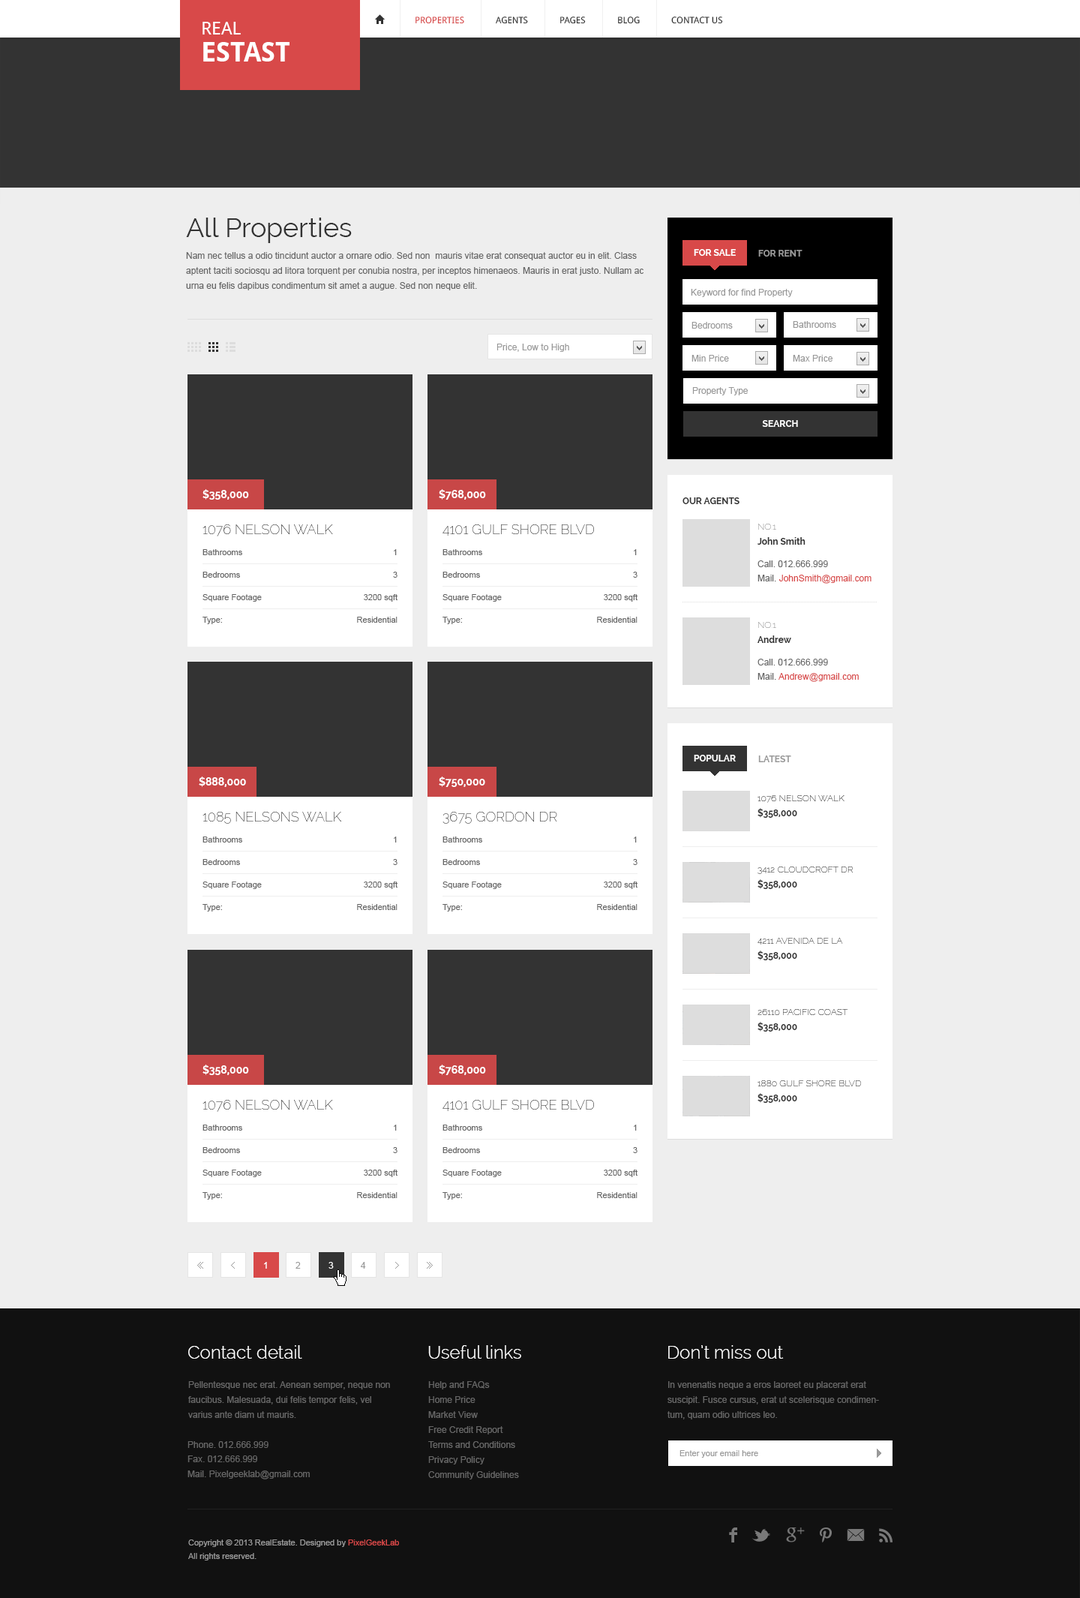
<style>
.page{position:relative;width:1080px;height:1598px;background:#eeeeee}
.page>*{position:absolute;margin:0}
.t1{font:9px "DroidSans";color:#d84949;text-transform:uppercase}
.t2{font:9px "DroidSans";color:#333333;text-transform:uppercase}
.t3{font:27px/27px "DroidSans-Bold";color:#ffffff;text-transform:uppercase}
.t4{font:18px/27px "DroidSans";color:#ffffff;text-transform:uppercase}
.t5{font:27px "Raleway";color:#333333}
.t6{font:9px/15px "ArialMT";color:#666666}
.t7{font:9px "Raleway-Bold";color:#ffffff;text-transform:uppercase}
.t8{font:9px "Raleway-Bold";color:#999999;text-transform:uppercase}
.t9{font:9px "ArialMT";color:#999999}
.t10{font:10.5px "Raleway-Bold";color:#ffffff;text-transform:uppercase}
.t11{font:9px "Raleway-Bold";color:#333333;text-transform:uppercase}
.t12{font:13.5px "Raleway-Thin";color:#333333;text-transform:uppercase}
.t13{font:9px "Raleway-Thin";text-transform:uppercase}
.t14{font:9px "Raleway-Bold";color:#333333}
.t15{font:8.2px "ArialMT";color:#666666}
.t16{font:9px "ArialMT";color:#666666}
.t17{font:9px "ArialMT";color:#d84949}
.t18{font:9px "Raleway-Thin";color:#333333;text-transform:uppercase}
.t19{font:9px "ArialMT";color:#ffffff}
</style>
<div class="page">
<p class="t1" style="left:416px;top:16px;width:48px;height:8px">Properties</p>
<p class="t2" style="left:496px;top:16px;width:32px;height:8px">agents</p>
<p class="t2" style="left:560px;top:16px;width:26px;height:8px">pages</p>
<p class="t2" style="left:618px;top:16px;width:22px;height:8px">blog</p>
<p class="t2" style="left:671px;top:16px;width:52px;height:8px">contact us</p>
<p class="t3" style="left:202px;top:22px;width:88px;height:40px"><span class="t4">Real <br></span>Estast</p>
<p class="t5" style="left:186px;top:218px;width:166px;height:25px">All Properties</p>
<p class="t6" style="left:186px;top:252px;width:458px;height:38px">Nam nec tellus a odio tincidunt auctor a ornare odio. Sed non  mauris vitae erat consequat auctor eu in elit. Class aptent taciti sociosqu ad litora torquent per conubia nostra, per inceptos himenaeos. Mauris in erat justo. Nullam ac urna eu felis dapibus condimentum sit amet a augue. Sed non neque elit.</p>
<p class="t7" style="left:694px;top:249px;width:42px;height:7px">for sale</p>
<p class="t8" style="left:758px;top:250px;width:44px;height:6px">for rent</p>
<p class="t9" style="left:691px;top:289px;width:102px;height:8px">Keyword for find Property</p>
<p class="t9" style="left:692px;top:322px;width:41px;height:6px">Bedrooms</p>
<p class="t9" style="left:793px;top:321px;width:43px;height:7px">Bathrooms</p>
<p class="t9" style="left:496px;top:344px;width:73px;height:8px">Price, Low to High</p>
<p class="t9" style="left:692px;top:355px;width:37px;height:7px">Min Price</p>
<p class="t9" style="left:793px;top:355px;width:39px;height:7px">Max Price</p>
<p class="t9" style="left:692px;top:387px;width:56px;height:8px">Property Type</p>
<p class="t7" style="left:762px;top:420px;width:36px;height:7px">search</p>
<p class="t10" style="left:202px;top:489px;width:47px;height:11px">$358,000</p>
<p class="t10" style="left:439px;top:489px;width:47px;height:11px">$768,000</p>
<p class="t11" style="left:682px;top:497px;width:58px;height:7px">our agents</p>
<p class="t12" style="left:202px;top:524px;width:131px;height:12px">1076 Nelson Walk</p>
<p class="t12" style="left:442px;top:524px;width:152px;height:12px">4101 Gulf Shore Blvd</p>
<p class="t13" style="left:758px;top:524px;width:18px;height:6px">No.1</p>
<p class="t14" style="left:758px;top:537px;width:48px;height:7px">John Smith</p>
<p class="t15" style="left:202px;top:549px;width:40px;height:6px">Bathrooms</p>
<p class="t15" style="left:394px;top:549px;width:3px;height:6px">1</p>
<p class="t15" style="left:442px;top:549px;width:40px;height:6px">Bathrooms</p>
<p class="t15" style="left:634px;top:549px;width:3px;height:6px">1</p>
<p class="t16" style="left:758px;top:560px;width:70px;height:7px">Call. 012.666.999</p>
<p class="t15" style="left:202px;top:572px;width:38px;height:6px">Bedrooms</p>
<p class="t15" style="left:393px;top:572px;width:5px;height:6px">3</p>
<p class="t15" style="left:442px;top:572px;width:38px;height:6px">Bedrooms</p>
<p class="t15" style="left:633px;top:572px;width:5px;height:6px">3</p>
<p class="t17" style="left:758px;top:574px;width:114px;height:10px"><span class="t16">Mail. </span>JohnSmith@gmail.com</p>
<p class="t15" style="left:202px;top:594px;width:60px;height:8px">Square Footage</p>
<p class="t15" style="left:364px;top:594px;width:34px;height:8px">3200 sqft</p>
<p class="t15" style="left:442px;top:594px;width:60px;height:8px">Square Footage</p>
<p class="t15" style="left:604px;top:594px;width:34px;height:8px">3200 sqft</p>
<p class="t15" style="left:202px;top:616px;width:20px;height:8px">Type:</p>
<p class="t15" style="left:357px;top:616px;width:41px;height:6px">Residential</p>
<p class="t15" style="left:442px;top:616px;width:20px;height:8px">Type:</p>
<p class="t15" style="left:597px;top:616px;width:41px;height:6px">Residential</p>
<p class="t13" style="left:758px;top:622px;width:18px;height:6px">No.1</p>
<p class="t14" style="left:758px;top:635px;width:33px;height:8px">Andrew</p>
<p class="t16" style="left:758px;top:658px;width:70px;height:7px">Call. 012.666.999</p>
<p class="t17" style="left:758px;top:673px;width:101px;height:9px"><span class="t16">Mail. </span>Andrew@gmail.com</p>
<p class="t7" style="left:694px;top:754px;width:42px;height:7px">popular</p>
<p class="t8" style="left:758px;top:755px;width:33px;height:7px">latest</p>
<p class="t10" style="left:199px;top:776px;width:47px;height:11px">$888,000</p>
<p class="t10" style="left:439px;top:776px;width:46px;height:11px">$750,000</p>
<p class="t18" style="left:758px;top:795px;width:86px;height:7px">1076 Nelson Walk</p>
<p class="t11" style="left:758px;top:808px;width:39px;height:10px">$358,000</p>
<p class="t12" style="left:202px;top:812px;width:139px;height:12px">1085 Nelsons Walk</p>
<p class="t12" style="left:442px;top:812px;width:115px;height:12px">3675 Gordon Dr</p>
<p class="t15" style="left:202px;top:836px;width:40px;height:6px">Bathrooms</p>
<p class="t15" style="left:394px;top:836px;width:3px;height:6px">1</p>
<p class="t15" style="left:442px;top:836px;width:40px;height:6px">Bathrooms</p>
<p class="t15" style="left:634px;top:836px;width:3px;height:6px">1</p>
<p class="t15" style="left:202px;top:859px;width:38px;height:6px">Bedrooms</p>
<p class="t15" style="left:393px;top:859px;width:5px;height:6px">3</p>
<p class="t15" style="left:442px;top:859px;width:38px;height:6px">Bedrooms</p>
<p class="t15" style="left:633px;top:859px;width:5px;height:6px">3</p>
<p class="t13" style="left:758px;top:866px;width:95px;height:8px">3412 Cloudcroft Dr</p>
<p class="t15" style="left:202px;top:881px;width:60px;height:8px">Square Footage</p>
<p class="t15" style="left:364px;top:881px;width:34px;height:8px">3200 sqft</p>
<p class="t15" style="left:442px;top:881px;width:60px;height:8px">Square Footage</p>
<p class="t15" style="left:604px;top:881px;width:34px;height:8px">3200 sqft</p>
<p class="t11" style="left:758px;top:879px;width:39px;height:10px">$358,000</p>
<p class="t15" style="left:202px;top:904px;width:20px;height:7px">Type:</p>
<p class="t15" style="left:357px;top:904px;width:41px;height:6px">Residential</p>
<p class="t15" style="left:442px;top:904px;width:20px;height:7px">Type:</p>
<p class="t15" style="left:597px;top:904px;width:41px;height:6px">Residential</p>
<p class="t18" style="left:758px;top:938px;width:85px;height:6px">4211 Avenida De La</p>
<p class="t11" style="left:758px;top:950px;width:39px;height:10px">$358,000</p>
<p class="t18" style="left:758px;top:1009px;width:90px;height:6px">26110 Pacific Coast</p>
<p class="t11" style="left:758px;top:1022px;width:39px;height:9px">$358,000</p>
<p class="t10" style="left:202px;top:1064px;width:47px;height:11px">$358,000</p>
<p class="t10" style="left:439px;top:1064px;width:47px;height:11px">$768,000</p>
<p class="t18" style="left:758px;top:1080px;width:104px;height:6px">1880 Gulf Shore Blvd</p>
<p class="t11" style="left:758px;top:1093px;width:39px;height:9px">$358,000</p>
<p class="t12" style="left:202px;top:1100px;width:131px;height:12px">1076 Nelson Walk</p>
<p class="t12" style="left:442px;top:1100px;width:152px;height:11px">4101 Gulf Shore Blvd</p>
<p class="t15" style="left:202px;top:1124px;width:40px;height:6px">Bathrooms</p>
<p class="t15" style="left:394px;top:1124px;width:3px;height:6px">1</p>
<p class="t15" style="left:442px;top:1124px;width:40px;height:6px">Bathrooms</p>
<p class="t15" style="left:634px;top:1124px;width:3px;height:6px">1</p>
<p class="t15" style="left:202px;top:1147px;width:38px;height:6px">Bedrooms</p>
<p class="t15" style="left:393px;top:1147px;width:5px;height:6px">3</p>
<p class="t15" style="left:442px;top:1147px;width:38px;height:6px">Bedrooms</p>
<p class="t15" style="left:633px;top:1147px;width:5px;height:6px">3</p>
<p class="t15" style="left:202px;top:1169px;width:60px;height:8px">Square Footage</p>
<p class="t15" style="left:364px;top:1169px;width:34px;height:8px">3200 sqft</p>
<p class="t15" style="left:442px;top:1169px;width:60px;height:8px">Square Footage</p>
<p class="t15" style="left:604px;top:1169px;width:34px;height:8px">3200 sqft</p>
<p class="t15" style="left:202px;top:1192px;width:20px;height:7px">Type:</p>
<p class="t15" style="left:357px;top:1192px;width:41px;height:6px">Residential</p>
<p class="t15" style="left:442px;top:1192px;width:20px;height:7px">Type:</p>
<p class="t15" style="left:597px;top:1192px;width:41px;height:6px">Residential</p>
<p class="t19" style="left:264px;top:1262px;width:3px;height:6px">1</p>
<p class="t9" style="left:296px;top:1262px;width:5px;height:6px">2</p>
<p class="t19" style="left:328px;top:1262px;width:6px;height:6px">3</p>
<p class="t9" style="left:361px;top:1262px;width:5px;height:6px">4</p>
</div>
